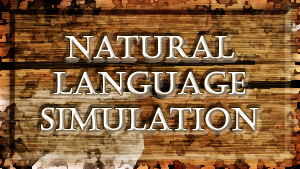
<style>
.page{position:relative;width:300px;height:169px}
.page>*{position:absolute;margin:0}
.t1{font:30px "Castellar";color:#ffffff;font-weight:bold}
</style>
<div class="page">
<p class="t1" style="left:41px;top:35px;width:219px;height:96px;text-align:center">Natural<br>Language <br>Simulation</p>
</div>
